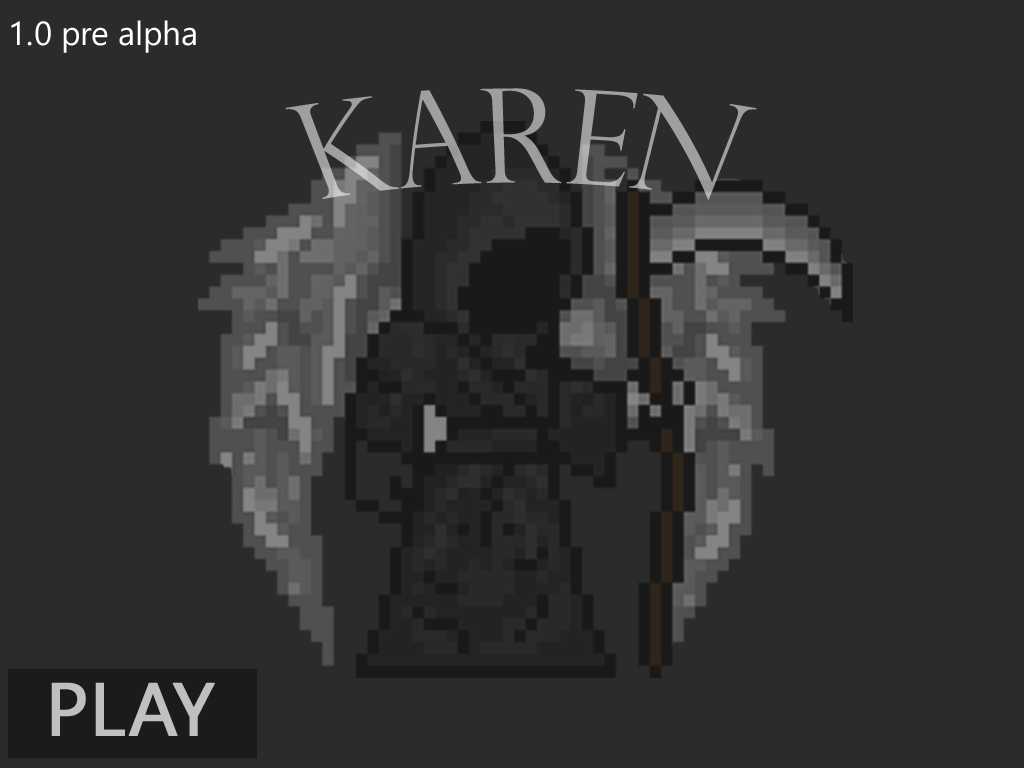
<style>
.page{position:relative;width:1024px;height:768px;background:#2a2b2a}
.page>*{position:absolute;margin:0}
.t1{font:33.2px "SegoeUIHistoric";color:#ffffff}
.t2{font:124.5px "PerpetuaTitlingMT-Light";color:#9f9f9f}
.t3{font:74.7px "SegoeUIHistoric";color:#c0c0c0;font-weight:bold}
</style>
<div class="page">
<p class="t1" style="left:11px;top:20px;width:185px;height:33px">1.0 pre alpha</p>
<p class="t2" style="left:285px;top:88px;width:472px;height:112px">KAREN</p>
<p class="t3" style="left:51px;top:682px;width:164px;height:54px">PLAY</p>
</div>
